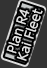
<style>
.page{position:relative;width:47px;height:68px;background:#333333}
.page>*{position:absolute;margin:0}
.t1{font:12px/12px "UDShinGoPro-Light";color:#e2e2e2;font-weight:bold}
</style>
<div class="page">
<p class="t1" style="left:6px;top:8px;width:37px;height:53px;text-align:center;rotate:-72deg">Plan R4<br>Kai Fleet</p>
</div>
